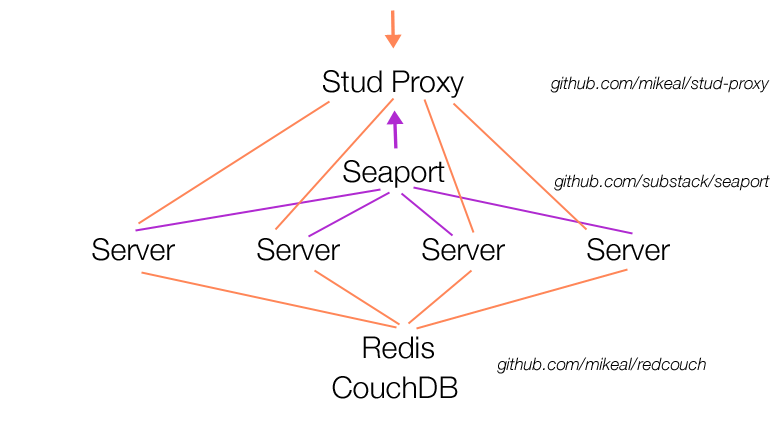
<style>
.page{position:relative;width:780px;height:432px;background:#ffffff}
.page>*{position:absolute;margin:0}
.t1{font:30px "HelveticaNeue-Light";color:#000000}
.t2{font:17px "HelveticaNeue-LightItalic";color:#000000}
</style>
<div class="page">
<p class="t1" style="left:323px;top:70px;width:141px;height:28px">Stud Proxy</p>
<p class="t2" style="left:550px;top:76px;width:220px;height:17px">github.com/mikeal/stud-proxy</p>
<p class="t1" style="left:343px;top:160px;width:102px;height:28px">Seaport</p>
<p class="t2" style="left:554px;top:174px;width:216px;height:17px">github.com/substack/seaport</p>
<p class="t1" style="left:92px;top:238px;width:83px;height:23px">Server</p>
<p class="t1" style="left:257px;top:238px;width:83px;height:23px">Server</p>
<p class="t1" style="left:422px;top:238px;width:83px;height:23px">Server</p>
<p class="t1" style="left:587px;top:238px;width:83px;height:23px">Server</p>
<p class="t1" style="left:363px;top:336px;width:71px;height:23px">Redis</p>
<p class="t2" style="left:497px;top:357px;width:209px;height:17px">github.com/mikeal/redcouch</p>
<p class="t1" style="left:332px;top:376px;width:126px;height:23px">CouchDB</p>
</div>
